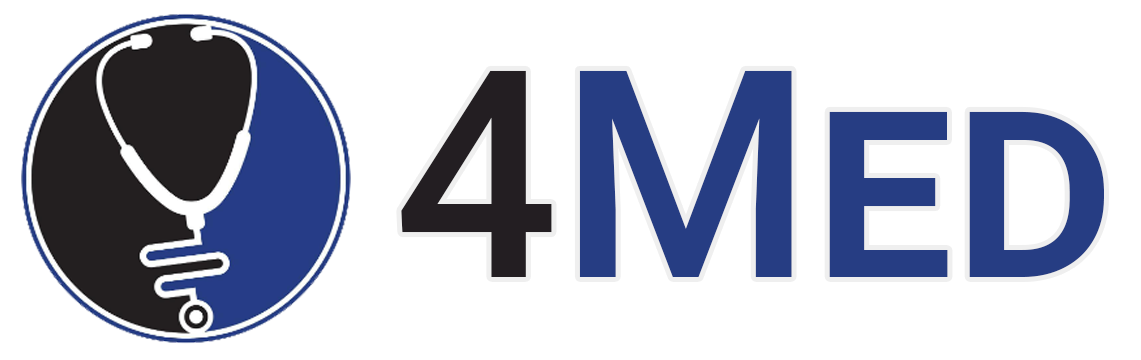
<style>
.page{position:relative;width:1141px;height:360px;background:#ffffff}
.page>*{position:absolute;margin:0}
.t1{font:290px "Roboto-Medium";color:#263d83;font-variant:small-caps}
.t2{font:290px "Roboto-Medium";color:#231e22;font-variant:small-caps}
</style>
<div class="page">
<p class="t1" style="left:401px;top:70px;width:703px;height:207px"><span class="t2">4</span>Med</p>
</div>
